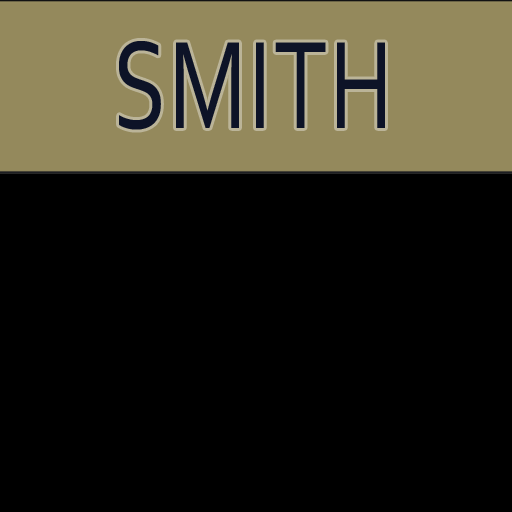
<style>
.page{position:relative;width:512px;height:512px;background:#000000}
.page>*{position:absolute;margin:0}
.t1{font:130.7px "Corbel";letter-spacing:0.02em;color:#0d1327;scale:0.73 1}
</style>
<div class="page">
<p class="t1" style="left:119px;top:41px;width:266px;height:89px">SMITH</p>
</div>
